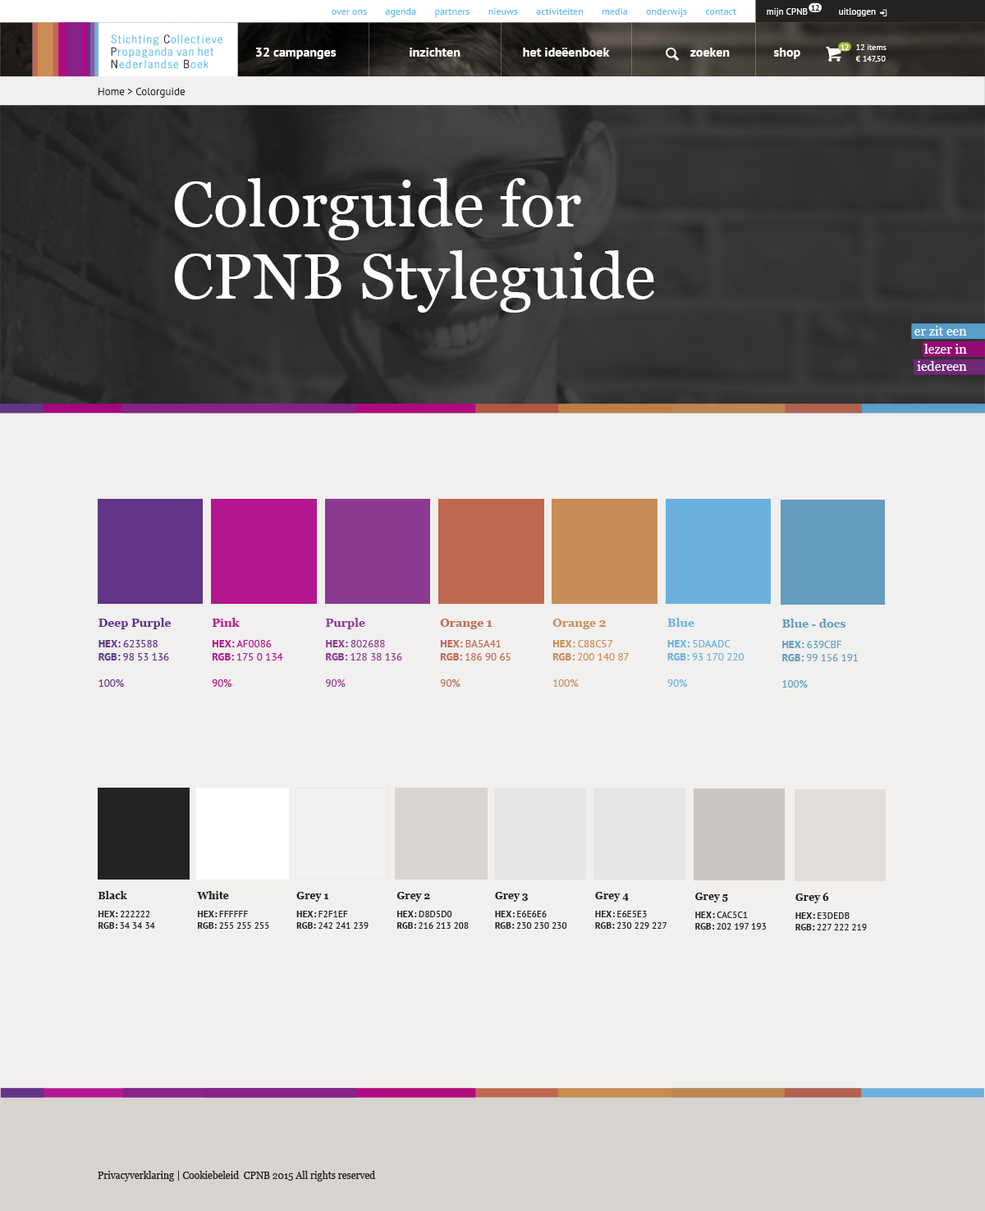
<style>
.page{position:relative;width:985px;height:1211px;background:#f1f0ee}
.page>*{position:absolute;margin:0}
.t1{font:8.2px "PTSans-Bold";letter-spacing:-0.05em;color:#222221}
.t2{font:9.8px "PTSans-Regular";color:#65bdec}
.t3{font:9.1px "PTSans-Regular";color:#ffffff}
.t4{font:13.1px "PTSans-Bold";color:#ffffff}
.t5{font:8.2px "PTSans-Bold";letter-spacing:-0.05em;color:#ffffff}
.t6{font:8.2px/11.5px "PTSans-Regular";color:#ffffff}
.t7{font:10.7px "PTSans-Regular";color:#222221}
.t8{font:64.3px/72.4px "Georgia";color:#ffffff}
.t9{font:13px/18px "Georgia";color:#ffffff}
.t10{font:10.7px/13.1px "PTSans-Regular";color:#623588;text-transform:uppercase}
.t11{font:11.5px "Georgia-Bold";color:#623588}
.t12{font:10.7px/20.5px "PTSans-Bold";color:#623588;text-transform:uppercase}
.t13{font:10.7px/20.5px "PTSans-Regular";color:#623588;text-transform:uppercase}
.t14{font:10.7px/13.1px "PTSans-Bold";color:#623588;text-transform:uppercase}
.t15{font:10.7px/13.1px "PTSans-Regular";color:#af0086;text-transform:uppercase}
.t16{font:11.5px "Georgia-Bold";color:#af0086}
.t17{font:10.7px/20.5px "PTSans-Bold";color:#af0086;text-transform:uppercase}
.t18{font:10.7px/20.5px "PTSans-Regular";color:#af0086;text-transform:uppercase}
.t19{font:10.7px/13.1px "PTSans-Bold";color:#af0086;text-transform:uppercase}
.t20{font:10.7px/13.1px "PTSans-Regular";color:#802688;text-transform:uppercase}
.t21{font:11.5px "Georgia-Bold";color:#802688}
.t22{font:10.7px/20.5px "PTSans-Bold";color:#802688;text-transform:uppercase}
.t23{font:10.7px/20.5px "PTSans-Regular";color:#802688;text-transform:uppercase}
.t24{font:10.7px/13.1px "PTSans-Bold";color:#802688;text-transform:uppercase}
.t25{font:10.7px/13.1px "PTSans-Regular";color:#5daadc;text-transform:uppercase}
.t26{font:11.5px "Georgia-Bold";color:#5daadc}
.t27{font:10.7px/20.5px "PTSans-Bold";color:#5daadc;text-transform:uppercase}
.t28{font:10.7px/20.5px "PTSans-Regular";color:#5daadc;text-transform:uppercase}
.t29{font:10.7px/13.1px "PTSans-Bold";color:#5daadc;text-transform:uppercase}
.t30{font:10.7px/13.1px "PTSans-Regular";color:#ba5a41;text-transform:uppercase}
.t31{font:11.5px "Georgia-Bold";color:#ba5a41}
.t32{font:10.7px/20.5px "PTSans-Bold";color:#ba5a41;text-transform:uppercase}
.t33{font:10.7px/20.5px "PTSans-Regular";color:#ba5a41;text-transform:uppercase}
.t34{font:10.7px/13.1px "PTSans-Bold";color:#ba5a41;text-transform:uppercase}
.t35{font:10.7px/13.1px "PTSans-Regular";color:#c88c57;text-transform:uppercase}
.t36{font:11.5px "Georgia-Bold";color:#c88c57}
.t37{font:10.7px/20.5px "PTSans-Bold";color:#c88c57;text-transform:uppercase}
.t38{font:10.7px/20.5px "PTSans-Regular";color:#c88c57;text-transform:uppercase}
.t39{font:10.7px/13.1px "PTSans-Bold";color:#c88c57;text-transform:uppercase}
.t40{font:10.7px/13.1px "PTSans-Regular";color:#639cbf;text-transform:uppercase}
.t41{font:11.5px "Georgia-Bold";color:#639cbf}
.t42{font:10.7px/20.5px "PTSans-Bold";color:#639cbf;text-transform:uppercase}
.t43{font:10.7px/20.5px "PTSans-Regular";color:#639cbf;text-transform:uppercase}
.t44{font:10.7px/13.1px "PTSans-Bold";color:#639cbf;text-transform:uppercase}
.t45{font:9.3px/11.4px "PTSans-Regular";color:#222222;text-transform:uppercase}
.t46{font:10px "Georgia-Bold";color:#222222}
.t47{font:9.3px/17.9px "PTSans-Bold";color:#222222;text-transform:uppercase}
.t48{font:9.3px/17.9px "PTSans-Regular";color:#222222;text-transform:uppercase}
.t49{font:9.3px/11.4px "PTSans-Bold";color:#222222;text-transform:uppercase}
.t50{font:9.8px "Georgia";color:#222221}
</style>
<div class="page">
<p class="t1" style="left:811px;top:5px;width:8px;height:6px">12</p>
<p class="t2" style="left:331px;top:8px;width:406px;height:9px">over ons       agenda       partners       nieuws       activiteiten       media       onderwijs       contact</p>
<p class="t3" style="left:766px;top:8px;width:41px;height:8px">mijn CPNB</p>
<p class="t3" style="left:839px;top:8px;width:36px;height:8px">uitloggen</p>
<p class="t4" style="left:256px;top:48px;width:80px;height:11px">32 campanges</p>
<p class="t4" style="left:409px;top:48px;width:51px;height:9px">inzichten</p>
<p class="t4" style="left:523px;top:48px;width:87px;height:9px">het ideëenboek</p>
<p class="t4" style="left:690px;top:48px;width:39px;height:9px">zoeken</p>
<p class="t4" style="left:773px;top:48px;width:27px;height:11px">shop</p>
<p class="t5" style="left:840px;top:44px;width:8px;height:6px">12</p>
<p class="t6" style="left:855px;top:44px;width:31px;height:18px">12 items<br>€ 147,50</p>
<p class="t7" style="left:98px;top:88px;width:87px;height:10px">Home &gt; Colorguide</p>
<p class="t8" style="left:174px;top:178px;width:480px;height:135px">Colorguide for<br>CPNB Styleguide</p>
<p class="t9" style="left:914px;top:326px;width:53px;height:45px;text-align:right">er zit een<br>lezer in<br>iedereen</p>
<p class="t10" style="left:98px;top:618px;width:73px;height:69px"><span class="t11">Deep Purple<br></span><span class="t12">HEX:</span><span class="t13"> 623588<br></span><span class="t14">RGB:</span> 98 53 136<br><br>100%</p>
<p class="t15" style="left:212px;top:618px;width:71px;height:69px;opacity:0.9"><span class="t16">Pink<br></span><span class="t17">HEX:</span><span class="t18"> af0086<br></span><span class="t19">RGB:</span> 175 0 134<br><br>90%</p>
<p class="t20" style="left:326px;top:618px;width:76px;height:69px;opacity:0.9"><span class="t21">Purple<br></span><span class="t22">HEX:</span><span class="t23"> 802688<br></span><span class="t24">RGB:</span> 128 38 136<br><br>90%</p>
<p class="t25" style="left:667px;top:618px;width:77px;height:69px;opacity:0.9"><span class="t26">Blue<br></span><span class="t27">HEX:</span><span class="t28"> 5daadc<br></span><span class="t29">RGB:</span> 93 170 220<br><br>90%</p>
<p class="t30" style="left:440px;top:619px;width:70px;height:68px;opacity:0.9"><span class="t31">Orange 1<br></span><span class="t32">HEX:</span><span class="t33"> ba5a41<br></span><span class="t34">RGB:</span> 186 90 65<br><br>90%</p>
<p class="t35" style="left:552px;top:619px;width:77px;height:68px"><span class="t36">Orange 2<br></span><span class="t37">HEX:</span><span class="t38"> c88c57<br></span><span class="t39">RGB:</span> 200 140 87<br><br>100%</p>
<p class="t40" style="left:782px;top:619px;width:75px;height:69px"><span class="t41">Blue - docs<br></span><span class="t42">HEX:</span><span class="t43"> 639cbf<br></span><span class="t44">RGB:</span> 99 156 191<br><br>100%</p>
<p class="t45" style="left:98px;top:891px;width:57px;height:38px"><span class="t46">Black<br></span><span class="t47">HEX:</span><span class="t48"> 222222<br></span><span class="t49">RGB:</span> 34 34 34</p>
<p class="t45" style="left:197px;top:891px;width:72px;height:38px"><span class="t46">White<br></span><span class="t47">HEX:</span><span class="t48"> ffffff<br></span><span class="t49">RGB:</span> 255 255 255</p>
<p class="t45" style="left:296px;top:892px;width:72px;height:37px"><span class="t46">Grey 1<br></span><span class="t47">HEX:</span><span class="t48"> f2f1ef<br></span><span class="t49">RGB:</span> 242 241 239</p>
<p class="t45" style="left:396px;top:892px;width:73px;height:37px"><span class="t46">Grey 2<br></span><span class="t47">HEX:</span><span class="t48"> d8d5d0<br></span><span class="t49">RGB:</span> 216 213 208</p>
<p class="t45" style="left:495px;top:892px;width:72px;height:37px"><span class="t46">Grey 3<br></span><span class="t47">HEX:</span><span class="t48"> e6e6e6<br></span><span class="t49">RGB:</span> 230 230 230</p>
<p class="t45" style="left:595px;top:892px;width:72px;height:37px"><span class="t46">Grey 4<br></span><span class="t47">HEX:</span><span class="t48"> E6E5E3<br></span><span class="t49">RGB:</span> 230 229 227</p>
<p class="t45" style="left:695px;top:893px;width:71px;height:37px"><span class="t46">Grey 5<br></span><span class="t47">HEX:</span><span class="t48"> cac5c1<br></span><span class="t49">RGB:</span> 202 197 193</p>
<p class="t45" style="left:795px;top:893px;width:71px;height:37px"><span class="t46">Grey 6<br></span><span class="t47">HEX:</span><span class="t48"> e3dedb<br></span><span class="t49">RGB:</span> 227 222 219</p>
<p class="t50" style="left:98px;top:1171px;width:278px;height:11px">Privacyverklaring | Cookiebeleid  CPNB 2015 All rights reserved</p>
</div>
